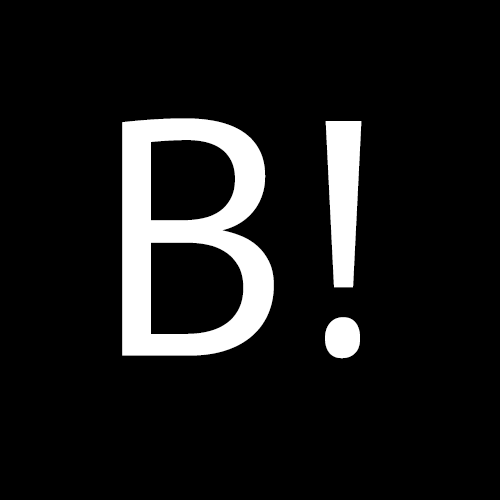
<style>
.page{position:relative;width:500px;height:500px;background:#000000}
.page>*{position:absolute;margin:0}
.t1{font:334.6px "Kootenay";letter-spacing:0.025em;color:#ffffff}
</style>
<div class="page">
<p class="t1" style="left:122px;top:118px;width:240px;height:241px">B!</p>
</div>
